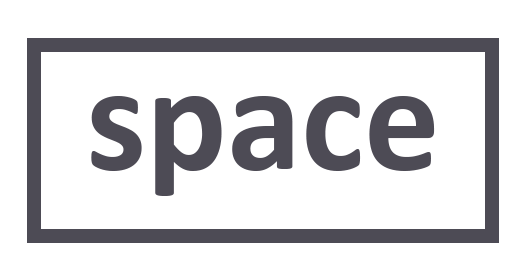
<style>
.page{position:relative;width:520px;height:280px;background:#ffffff}
.page>*{position:absolute;margin:0}
.t1{font:258.5px "Calibri-Bold";color:#4d4b55}
</style>
<div class="page">
<p class="t1" style="left:91px;top:96px;width:344px;height:100px">space</p>
</div>
